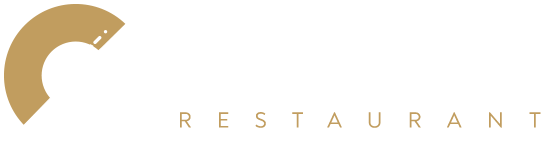
<style>
.page{position:relative;width:549px;height:149px;background:#ffffff}
.page>*{position:absolute;margin:0}
.t1{font:22px "Noah-Regular";letter-spacing:1.15em;color:#c19d5f;text-transform:uppercase}
</style>
<div class="page">
<p class="t1" style="left:180px;top:112px;width:361px;height:16px">restaurant</p>
</div>
